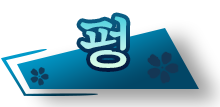
<style>
.page{position:relative;width:220px;height:107px;background:#ffffff}
.page>*{position:absolute;margin:0}
.t1{font:57.7px "SDKukdetopokki-aLt";letter-spacing:0.06em}
</style>
<div class="page">
<p class="t1" style="left:80px;top:16px;width:47px;height:52px">펑</p>
</div>
